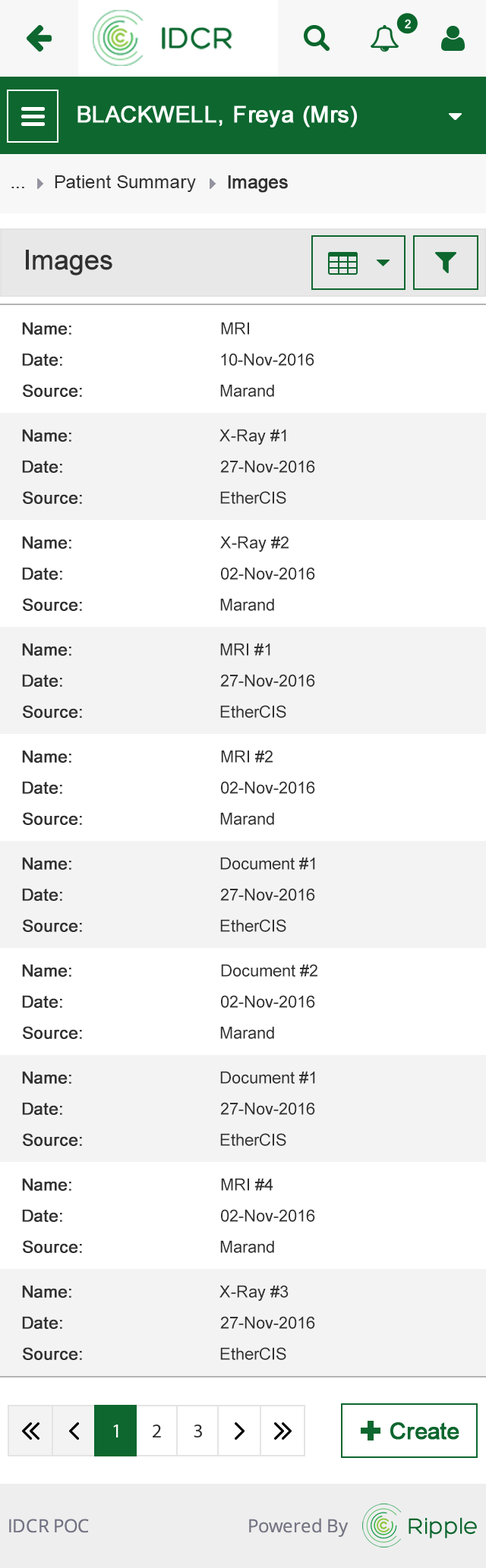
<style>
.page{position:relative;width:486px;height:1568px;background:#ffffff}
.page>*{position:absolute;margin:0}
.t1{font:18.2px "ArialMT";color:#313131}
.t2{font:18.2px "ArialMT";color:#313131;font-weight:bold}
.t3{font:27.3px "ArialMT";color:#303030;font-weight:bold}
.t4{font:16.7px "ArialMT";color:#303030;font-weight:bold}
.t5{font:16.7px "ArialMT";color:#303030}
</style>
<div class="page">
<p class="t1" style="left:55px;top:175px;width:141px;height:17px">Patient Summary</p>
<p class="t2" style="left:228px;top:175px;width:60px;height:18px">Images</p>
<p class="t1" style="left:11px;top:187px;width:13px;height:1px">...</p>
<p class="t3" style="left:26px;top:250px;width:86px;height:26px">Images</p>
<p class="t4" style="left:22px;top:322px;width:49px;height:13px">Name:</p>
<p class="t5" style="left:221px;top:322px;width:28px;height:13px">MRI</p>
<p class="t4" style="left:22px;top:353px;width:40px;height:13px">Date:</p>
<p class="t5" style="left:221px;top:353px;width:93px;height:13px">10-Nov-2016</p>
<p class="t4" style="left:23px;top:384px;width:59px;height:13px">Source:</p>
<p class="t5" style="left:220px;top:384px;width:54px;height:13px">Marand</p>
<p class="t4" style="left:22px;top:429px;width:49px;height:13px">Name:</p>
<p class="t5" style="left:219px;top:429px;width:67px;height:16px">X-Ray #1</p>
<p class="t4" style="left:22px;top:460px;width:40px;height:13px">Date:</p>
<p class="t5" style="left:220px;top:460px;width:95px;height:13px">27-Nov-2016</p>
<p class="t4" style="left:23px;top:491px;width:59px;height:13px">Source:</p>
<p class="t5" style="left:220px;top:491px;width:66px;height:13px">EtherCIS</p>
<p class="t4" style="left:22px;top:536px;width:49px;height:13px">Name:</p>
<p class="t5" style="left:220px;top:536px;width:68px;height:16px">X-Ray #2</p>
<p class="t4" style="left:22px;top:567px;width:40px;height:13px">Date:</p>
<p class="t5" style="left:221px;top:567px;width:94px;height:13px">02-Nov-2016</p>
<p class="t4" style="left:23px;top:598px;width:59px;height:13px">Source:</p>
<p class="t5" style="left:220px;top:598px;width:54px;height:13px">Marand</p>
<p class="t4" style="left:22px;top:643px;width:49px;height:13px">Name:</p>
<p class="t5" style="left:220px;top:643px;width:50px;height:13px">MRI #1</p>
<p class="t4" style="left:22px;top:674px;width:40px;height:13px">Date:</p>
<p class="t5" style="left:220px;top:674px;width:95px;height:13px">27-Nov-2016</p>
<p class="t4" style="left:23px;top:705px;width:59px;height:13px">Source:</p>
<p class="t5" style="left:220px;top:705px;width:66px;height:13px">EtherCIS</p>
<p class="t4" style="left:22px;top:750px;width:49px;height:13px">Name:</p>
<p class="t5" style="left:221px;top:750px;width:51px;height:13px">MRI #2</p>
<p class="t4" style="left:22px;top:781px;width:40px;height:13px">Date:</p>
<p class="t5" style="left:221px;top:781px;width:94px;height:13px">02-Nov-2016</p>
<p class="t4" style="left:23px;top:812px;width:59px;height:13px">Source:</p>
<p class="t5" style="left:220px;top:812px;width:54px;height:13px">Marand</p>
<p class="t4" style="left:22px;top:857px;width:49px;height:13px">Name:</p>
<p class="t5" style="left:220px;top:857px;width:95px;height:13px">Document #1</p>
<p class="t4" style="left:22px;top:888px;width:40px;height:13px">Date:</p>
<p class="t5" style="left:220px;top:888px;width:95px;height:13px">27-Nov-2016</p>
<p class="t4" style="left:23px;top:919px;width:59px;height:13px">Source:</p>
<p class="t5" style="left:220px;top:919px;width:66px;height:13px">EtherCIS</p>
<p class="t4" style="left:22px;top:964px;width:49px;height:13px">Name:</p>
<p class="t5" style="left:221px;top:964px;width:96px;height:13px">Document #2</p>
<p class="t4" style="left:22px;top:995px;width:40px;height:13px">Date:</p>
<p class="t5" style="left:221px;top:995px;width:94px;height:13px">02-Nov-2016</p>
<p class="t4" style="left:23px;top:1026px;width:59px;height:13px">Source:</p>
<p class="t5" style="left:220px;top:1026px;width:54px;height:13px">Marand</p>
<p class="t4" style="left:22px;top:1071px;width:49px;height:13px">Name:</p>
<p class="t5" style="left:220px;top:1071px;width:95px;height:13px">Document #1</p>
<p class="t4" style="left:22px;top:1102px;width:40px;height:13px">Date:</p>
<p class="t5" style="left:220px;top:1102px;width:95px;height:13px">27-Nov-2016</p>
<p class="t4" style="left:23px;top:1133px;width:59px;height:13px">Source:</p>
<p class="t5" style="left:220px;top:1133px;width:66px;height:13px">EtherCIS</p>
<p class="t4" style="left:22px;top:1178px;width:49px;height:13px">Name:</p>
<p class="t5" style="left:221px;top:1178px;width:52px;height:13px">MRI #4</p>
<p class="t4" style="left:22px;top:1209px;width:40px;height:13px">Date:</p>
<p class="t5" style="left:221px;top:1209px;width:94px;height:13px">02-Nov-2016</p>
<p class="t4" style="left:23px;top:1240px;width:59px;height:13px">Source:</p>
<p class="t5" style="left:220px;top:1240px;width:54px;height:13px">Marand</p>
<p class="t4" style="left:22px;top:1285px;width:49px;height:13px">Name:</p>
<p class="t5" style="left:219px;top:1285px;width:69px;height:16px">X-Ray #3</p>
<p class="t4" style="left:22px;top:1316px;width:40px;height:13px">Date:</p>
<p class="t5" style="left:220px;top:1316px;width:95px;height:13px">27-Nov-2016</p>
<p class="t4" style="left:23px;top:1347px;width:59px;height:13px">Source:</p>
<p class="t5" style="left:220px;top:1347px;width:66px;height:13px">EtherCIS</p>
</div>
